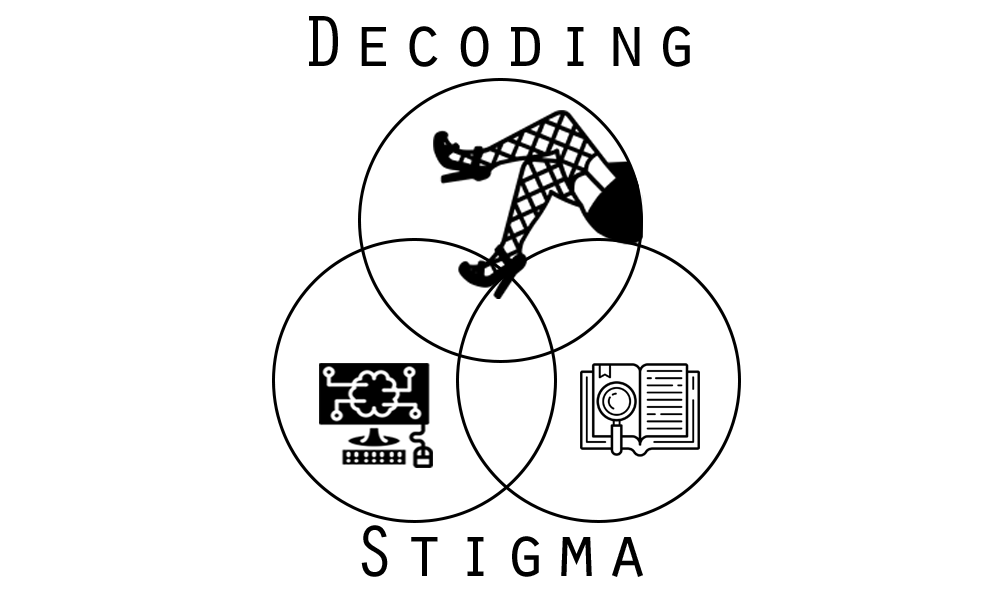
<style>
.page{position:relative;width:1000px;height:600px;background:#ffffff}
.page>*{position:absolute;margin:0}
.t1{font:75px "OratorStd";letter-spacing:0.075em;color:#000000}
</style>
<div class="page">
<p class="t1" style="left:309px;top:16px;width:381px;height:51px">Decoding</p>
<p class="t1" style="left:361px;top:525px;width:282px;height:52px">Stigma</p>
</div>
